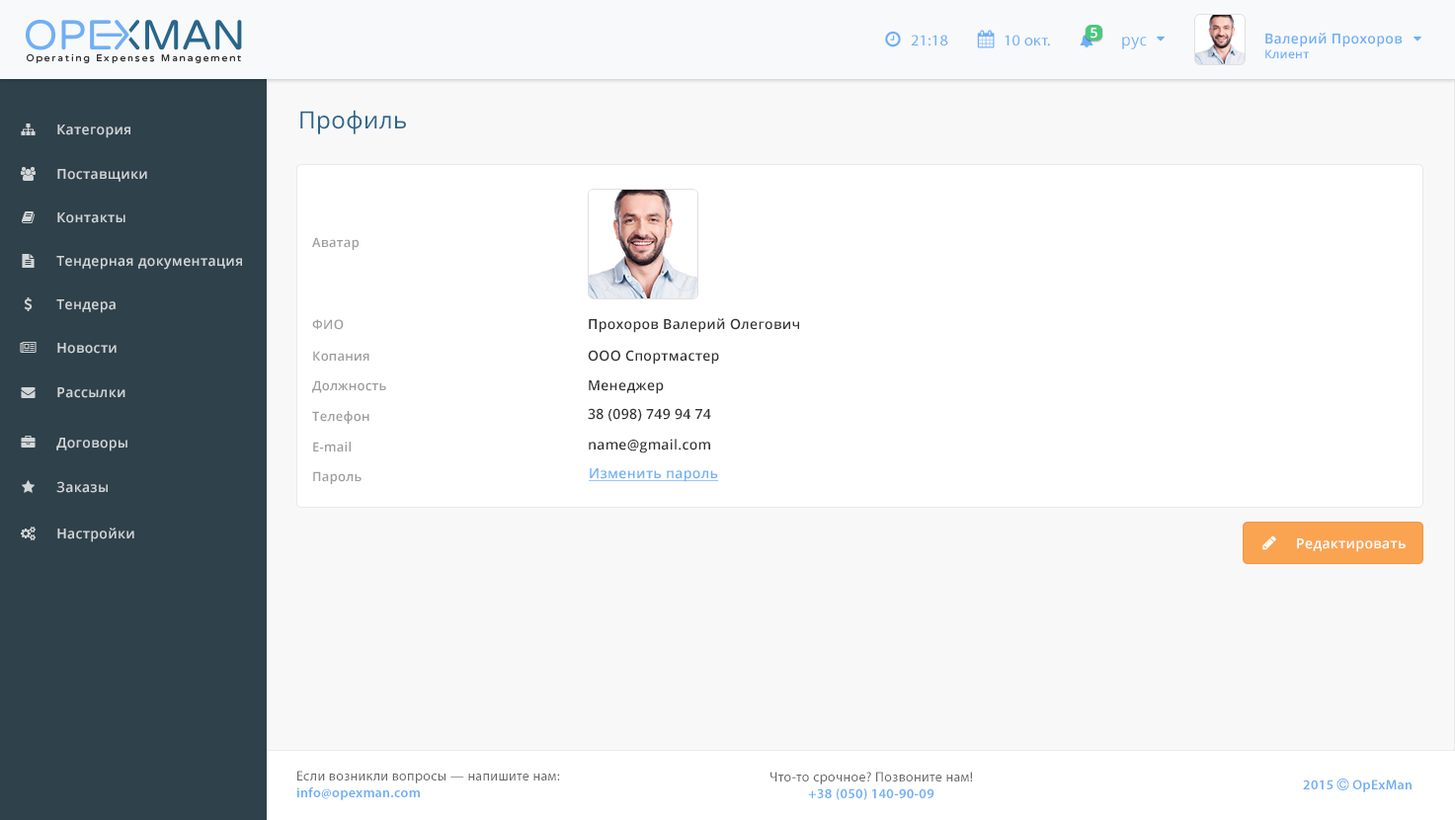
<style>
.page{position:relative;width:1455px;height:820px;background:#ffffff}
.page>*{position:absolute;margin:0}
.t1{font:13.8px "OpenSans-Semibold";letter-spacing:0.025em;color:#ffffff}
.t2{font:15.7px "MyriadPro-Regular";letter-spacing:0.025em;color:#6faff8}
.t3{font:15.7px "OpenSans";letter-spacing:0.025em;color:#6eaff8}
.t4{font:13.8px "OpenSans-Semibold";letter-spacing:0.025em;color:#6eaef7}
.t5{font:11.8px "OpenSans-Semibold";letter-spacing:0.025em;color:#6eaef7}
.t6{font:23.6px "OpenSans";letter-spacing:0.025em;color:#29658b}
.t7{font:13.8px "OpenSans-Semibold";letter-spacing:0.025em;color:#d2d5d7}
.t8{font:12.8px "OpenSans-Semibold";letter-spacing:0.025em;color:#9e9d9d}
.t9{font:13.8px "OpenSans-Semibold";letter-spacing:0.025em;color:#333333}
.t10{font:13.8px "OpenSans-Semibold";letter-spacing:0.025em;color:#6faff8;text-decoration:underline}
.t11{font:13.8px "MyriadPro-Regular";letter-spacing:0.025em;color:#696969}
.t12{font:13.8px "MyriadPro-Semibold";letter-spacing:0.025em;color:#6eaef8}
</style>
<div class="page">
<p class="t1" style="left:1090px;top:28px;width:7px;height:11px">5</p>
<p class="t2" style="left:911px;top:35px;width:37px;height:11px">21:18</p>
<p class="t2" style="left:1004px;top:35px;width:46px;height:11px">10 окт.</p>
<p class="t3" style="left:1122px;top:37px;width:25px;height:12px">рус</p>
<p class="t4" style="left:1265px;top:33px;width:137px;height:25px">Валерий Прохоров<br><span class="t5">Клиент</span></p>
<p class="t6" style="left:300px;top:110px;width:106px;height:24px">Профиль</p>
<p class="t7" style="left:57px;top:124px;width:73px;height:14px">Категория</p>
<p class="t7" style="left:57px;top:169px;width:90px;height:13px">Поставщики</p>
<p class="t7" style="left:57px;top:212px;width:68px;height:11px">Контакты</p>
<p class="t8" style="left:312px;top:237px;width:46px;height:13px">Аватар</p>
<p class="t7" style="left:56px;top:256px;width:186px;height:14px">Тендерная документация</p>
<p class="t7" style="left:56px;top:299px;width:60px;height:14px">Тендера</p>
<p class="t8" style="left:312px;top:319px;width:32px;height:11px">ФИО</p>
<p class="t9" style="left:589px;top:318px;width:210px;height:15px">Прохоров Валерий Олегович</p>
<p class="t7" style="left:57px;top:343px;width:60px;height:11px">Новости</p>
<p class="t8" style="left:313px;top:351px;width:56px;height:10px">Копания</p>
<p class="t9" style="left:588px;top:350px;width:131px;height:14px">ООО Спортмастер</p>
<p class="t7" style="left:57px;top:387px;width:68px;height:11px">Рассылки</p>
<p class="t8" style="left:312px;top:380px;width:74px;height:13px">Должность</p>
<p class="t9" style="left:589px;top:380px;width:75px;height:14px">Менеджер</p>
<p class="t8" style="left:312px;top:411px;width:57px;height:13px">Телефон</p>
<p class="t9" style="left:588px;top:408px;width:123px;height:14px">38 (098) 749 94 74</p>
<p class="t7" style="left:56px;top:438px;width:71px;height:13px">Договоры</p>
<p class="t8" style="left:313px;top:441px;width:38px;height:11px">E-mail</p>
<p class="t9" style="left:589px;top:438px;width:121px;height:15px">name@gmail.com</p>
<p class="t8" style="left:313px;top:471px;width:48px;height:13px">Пароль</p>
<p class="t10" style="left:589px;top:468px;width:130px;height:14px">Изменить пароль</p>
<p class="t7" style="left:56px;top:481px;width:52px;height:12px">Заказы</p>
<p class="t7" style="left:57px;top:527px;width:77px;height:15px">Настройки</p>
<p class="t1" style="left:1297px;top:538px;width:108px;height:14px">Редактировать</p>
<p class="t11" style="left:296px;top:770px;width:264px;height:30px">Если возникли вопросы — напишите нам:<br><span class="t12">info@opexman.com</span></p>
<p class="t11" style="left:770px;top:771px;width:203px;height:29px;text-align:center">Что-то срочное? Позвоните нам!<br><span class="t12">+38 (050) 140-90-09</span></p>
</div>
